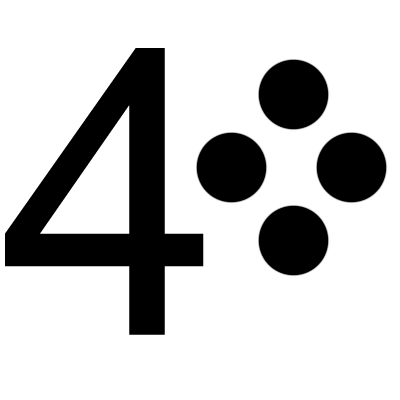
<style>
.page{position:relative;width:400px;height:400px;background:#ffffff}
.page>*{position:absolute;margin:0}
.t1{font:400.2px "ArialMT";color:#000000}
</style>
<div class="page">
<p class="t1" style="left:5px;top:48px;width:199px;height:287px">4</p>
</div>
